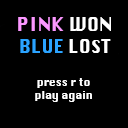
<style>
.page{position:relative;width:128px;height:128px;background:#000000}
.page>*{position:absolute;margin:0}
.t1{font:18px "Krungthep";color:#fb97ff}
.t2{font:18px "Krungthep";color:#ffffff}
.t3{font:18px "Krungthep";color:#2ba3ff}
.t4{font:10.4px "Krungthep";color:#ffffff}
</style>
<div class="page">
<p class="t1" style="left:18px;top:17px;width:93px;height:36px;text-align:center">PINK<span class="t2"> WON<br></span><span class="t3">BLUE </span><span class="t2">LOST</span></p>
<p class="t4" style="left:35px;top:78px;width:57px;height:24px;text-align:center">press r to <br>play again</p>
</div>
